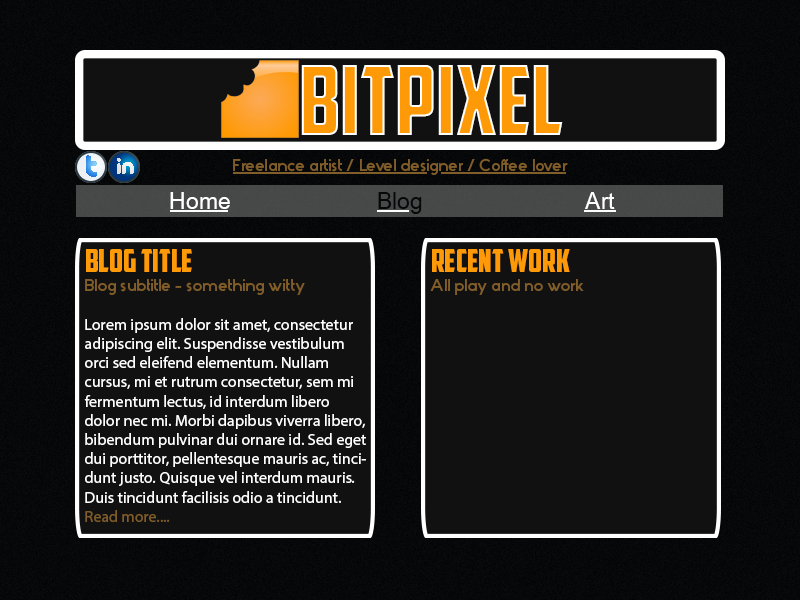
<style>
.page{position:relative;width:800px;height:600px;background:#111111}
.page>*{position:absolute;margin:0}
.t1{font:96px "AmericanCaptain";color:#fe9a08}
.t2{font:32px "PicoBlackAl"}
.t3{font:24px "PicoBlackAl";color:#eeeeee}
.t4{font:16px "Stark";color:#815d29}
.t5{font:32px "Utsaah";color:#ffffff}
.t6{font:32px "Utsaah";color:#060708}
.t7{font:16px "MyriadPro-Regular";color:#ffffff}
.t8{font:32px "AmericanCaptain";color:#fe9a08}
.t9{font:16px "MyriadPro-Regular";color:#815d29}
</style>
<div class="page">
<p class="t1" style="left:301px;top:65px;width:262px;height:70px">BITPIXEL</p>
<p class="t2" style="left:86px;top:155px;width:11px;height:22px">t</p>
<p class="t3" style="left:117px;top:158px;width:17px;height:16px">in</p>
<p class="t4" style="left:233px;top:158px;width:335px;height:17px">Freelance artist / Level designer / Coffee lover</p>
<p class="t5" style="left:170px;top:192px;width:60px;height:17px">Home</p>
<p class="t6" style="left:378px;top:192px;width:44px;height:22px">Blog</p>
<p class="t5" style="left:585px;top:192px;width:30px;height:17px">Art</p>
<p class="t7" style="left:84px;top:249px;width:282px;height:273px"><span class="t8">Blog title<br></span><span class="t4">Blog subtitle - something witty<br></span><br>Lorem ipsum dolor sit amet, consectetur adipiscing elit. Suspendisse vestibulum orci sed eleifend elementum. Nullam cursus, mi et rutrum consectetur, sem mi fermentum lectus, id interdum libero dolor nec mi. Morbi dapibus viverra libero, bibendum pulvinar dui ornare id. Sed eget dui porttitor, pellentesque mauris ac, tincidunt justo. Quisque vel interdum mauris. Duis tincidunt facilisis odio a tincidunt. <span class="t9">Read more....</span></p>
<p class="t4" style="left:430px;top:249px;width:154px;height:46px"><span class="t8">Recent work<br></span>All play and no work</p>
</div>
